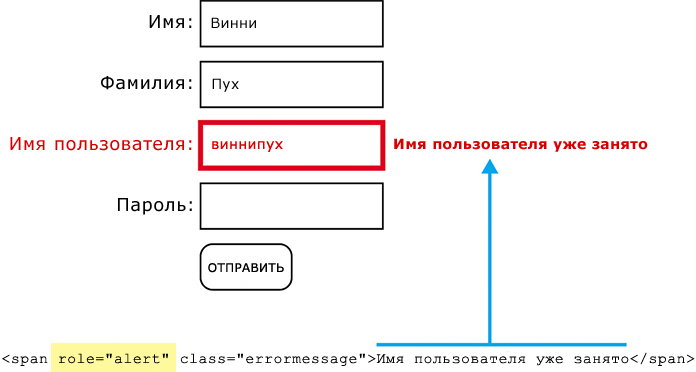
<style>
.page{position:relative;width:696px;height:372px;background:#ffffff}
.page>*{position:absolute;margin:0}
.t1{font:18px "Verdana";letter-spacing:0.025em;color:#000000}
.t2{font:14px "Verdana";letter-spacing:0.025em;color:#000000}
.t3{font:18px "Verdana";letter-spacing:0.025em;color:#d70000}
.t4{font:14px "Verdana";letter-spacing:0.025em;color:#d70000}
.t5{font:14px "Verdana-Bold";letter-spacing:0.025em;color:#d70000}
.t6{font:12px "Verdana";letter-spacing:0.025em;color:#000000}
.t7{font:15px "CourierNewPSMT";letter-spacing:0.025em;color:#000000}
</style>
<div class="page">
<p class="t1" style="left:149px;top:15px;width:43px;height:13px">Имя:</p>
<p class="t2" style="left:211px;top:17px;width:45px;height:11px">Винни</p>
<p class="t1" style="left:101px;top:76px;width:91px;height:14px">Фамилия:</p>
<p class="t2" style="left:212px;top:78px;width:27px;height:14px">Пух</p>
<p class="t3" style="left:10px;top:137px;width:182px;height:14px">Имя пользователя:</p>
<p class="t4" style="left:212px;top:141px;width:71px;height:11px">виннипух</p>
<p class="t5" style="left:394px;top:138px;width:254px;height:14px">Имя пользователя уже занято</p>
<p class="t1" style="left:118px;top:198px;width:74px;height:17px">Пароль:</p>
<p class="t6" style="left:208px;top:263px;width:76px;height:10px">ОТПРАВИТЬ</p>
<p class="t7" style="left:2px;top:352px;width:693px;height:14px">&lt;span role="alert" class="errormessage"&gt;Имя пользователя уже занято&lt;/span&gt;</p>
</div>
